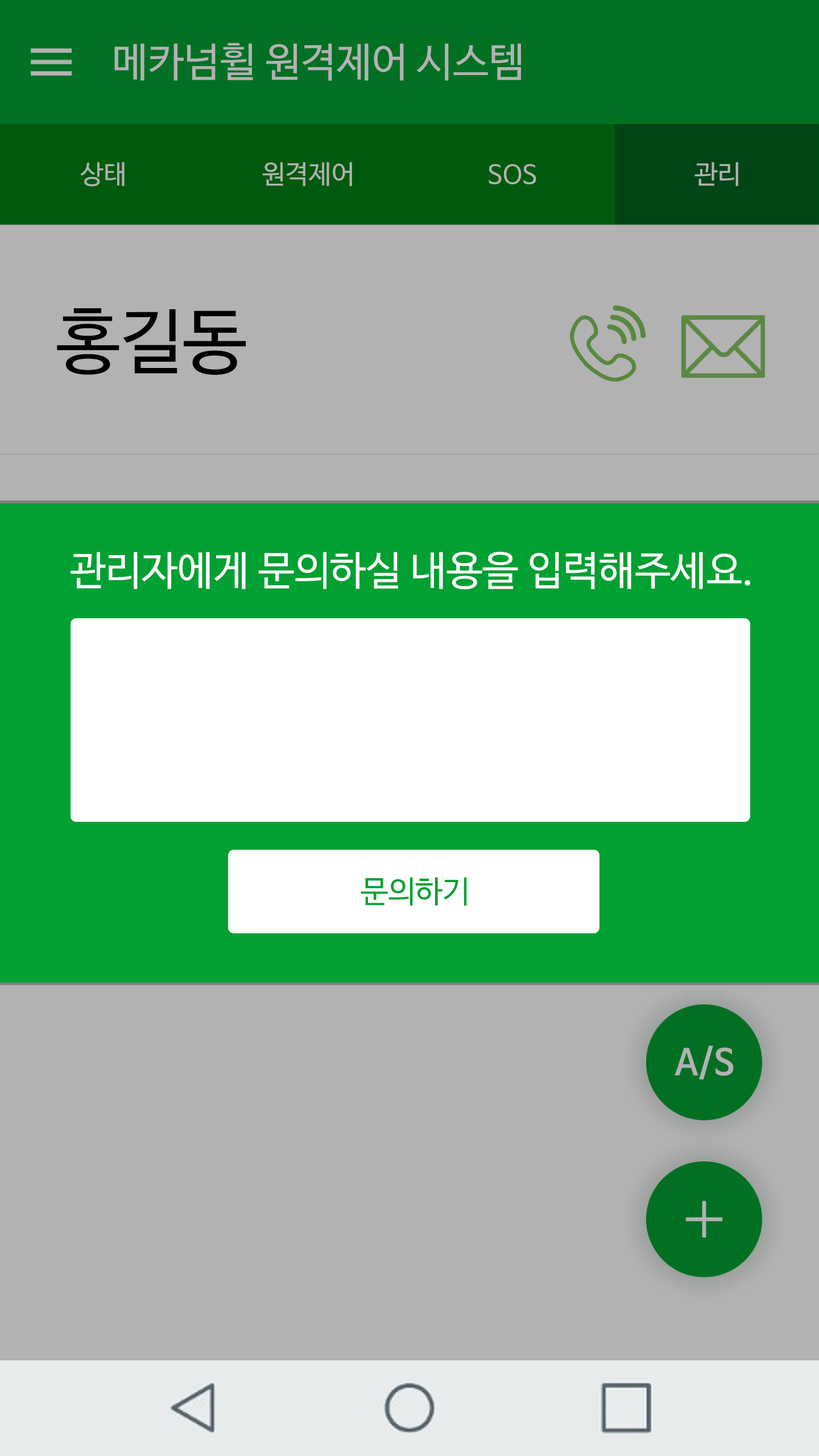
<style>
.page{position:relative;width:819px;height:1456px;background:#b2b2b2}
.page>*{position:absolute;margin:0}
.t1{font:40.3px "NanumBarunGothicOTF";color:#b2b2b2}
.t2{font:26.1px "NanumBarunGothicOTF";color:#b2b2b2}
.t3{font:71.1px "NanumBarunGothicOTF";color:#000000}
.t4{font:40.3px "NanumBarunGothicOTF";color:#ffffff}
.t5{font:30.8px "NanumBarunGothicOTF";color:#01a032}
.t6{font:35.5px "NanumBarunGothicOTFBold";color:#b2b2b2}
</style>
<div class="page">
<p class="t1" style="left:114px;top:43px;width:407px;height:38px">메카넘휠 원격제어 시스템</p>
<p class="t2" style="left:80px;top:162px;width:45px;height:25px">상태</p>
<p class="t2" style="left:263px;top:162px;width:89px;height:25px">원격제어</p>
<p class="t2" style="left:489px;top:164px;width:47px;height:20px">SOS</p>
<p class="t2" style="left:694px;top:162px;width:44px;height:24px">관리</p>
<p class="t3" style="left:57px;top:308px;width:189px;height:67px">홍길동</p>
<p class="t4" style="left:71px;top:552px;width:679px;height:37px">관리자에게 문의하실 내용을 입력해주세요.</p>
<p class="t5" style="left:361px;top:877px;width:106px;height:29px">문의하기</p>
<p class="t6" style="left:675px;top:1045px;width:59px;height:34px">A/S</p>
</div>
